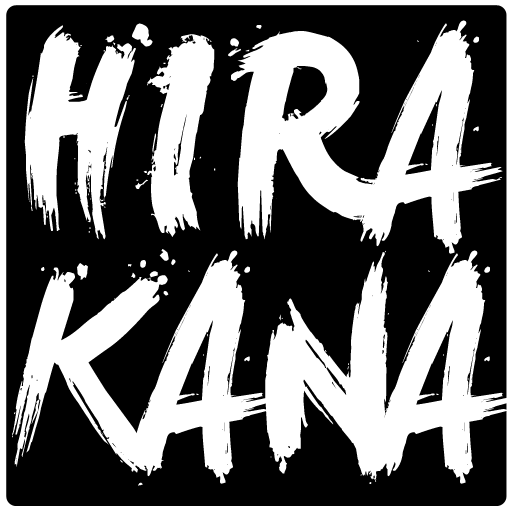
<style>
.page{position:relative;width:512px;height:512px;background:#000000}
.page>*{position:absolute;margin:0}
.t1{font:294px "LeviBrush";color:#ffffff}
.t2{font:266.7px "LeviBrush";color:#ffffff}
.t3{font:226.1px "LeviBrush";color:#ffffff}
.t4{font:251.7px "LeviBrush";color:#ffffff;scale:0.84 1}
.t5{font:260.9px "LeviBrush";color:#ffffff;scale:0.73 1}
</style>
<div class="page">
<p class="t1" style="left:24px;top:23px;width:129px;height:217px">H</p>
<p class="t2" style="left:228px;top:25px;width:184px;height:215px;rotate:1deg">R</p>
<p class="t2" style="left:360px;top:20px;width:150px;height:234px">A</p>
<p class="t3" style="left:135px;top:34px;width:81px;height:203px">I</p>
<p class="t4" style="left:12px;top:249px;width:164px;height:237px">K</p>
<p class="t2" style="left:131px;top:250px;width:150px;height:234px">A</p>
<p class="t5" style="left:265px;top:250px;width:128px;height:234px">N</p>
</div>
